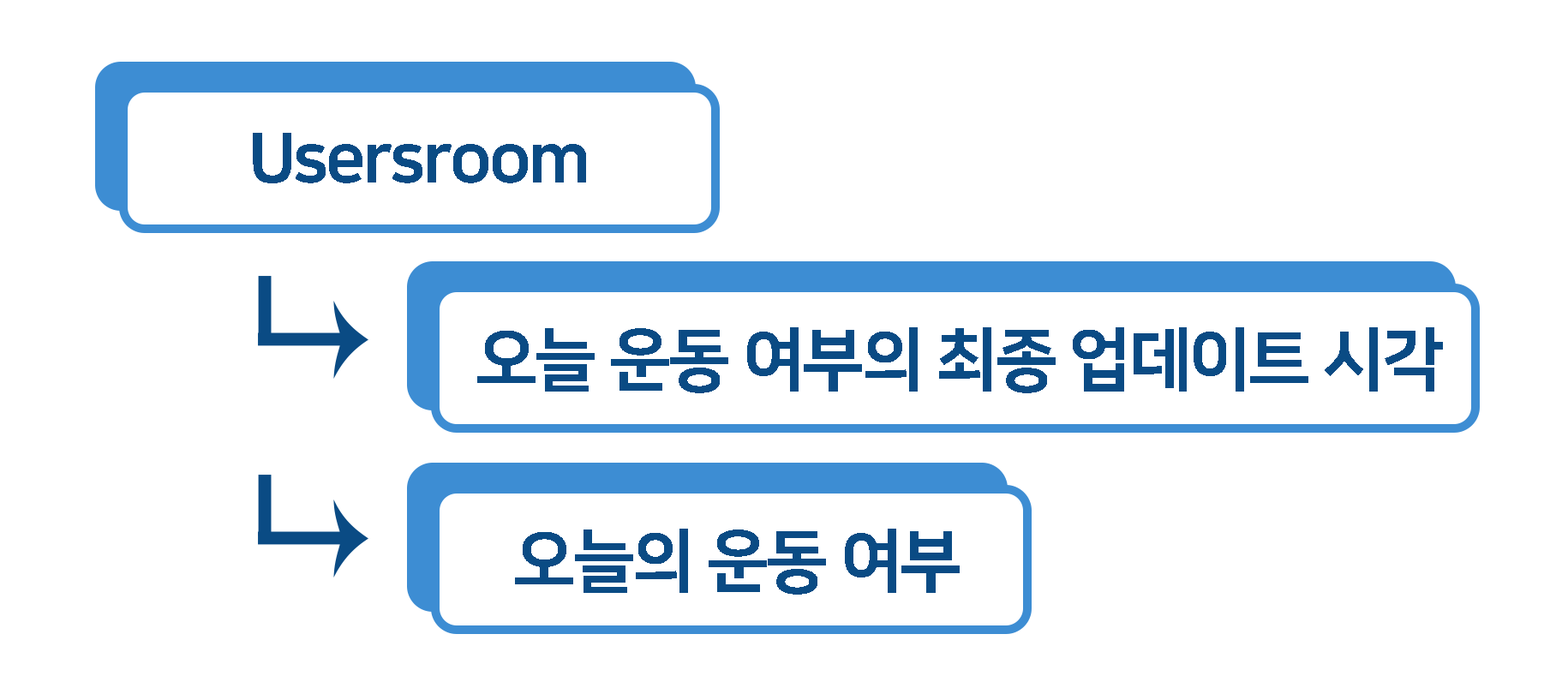
<style>
.page{position:relative;width:1568px;height:688px;background:#ffffff}
.page>*{position:absolute;margin:0}
.t1{font:68.5px "NanumSquareEB";letter-spacing:-0.04em;color:#0a4b84}
</style>
<div class="page">
<p class="t1" style="left:253px;top:133px;width:333px;height:50px">Usersroom</p>
<p class="t1" style="left:477px;top:327px;width:966px;height:66px">오늘 운동 여부의 최종 업데이트 시각</p>
<p class="t1" style="left:515px;top:529px;width:445px;height:66px">오늘의 운동 여부</p>
</div>
